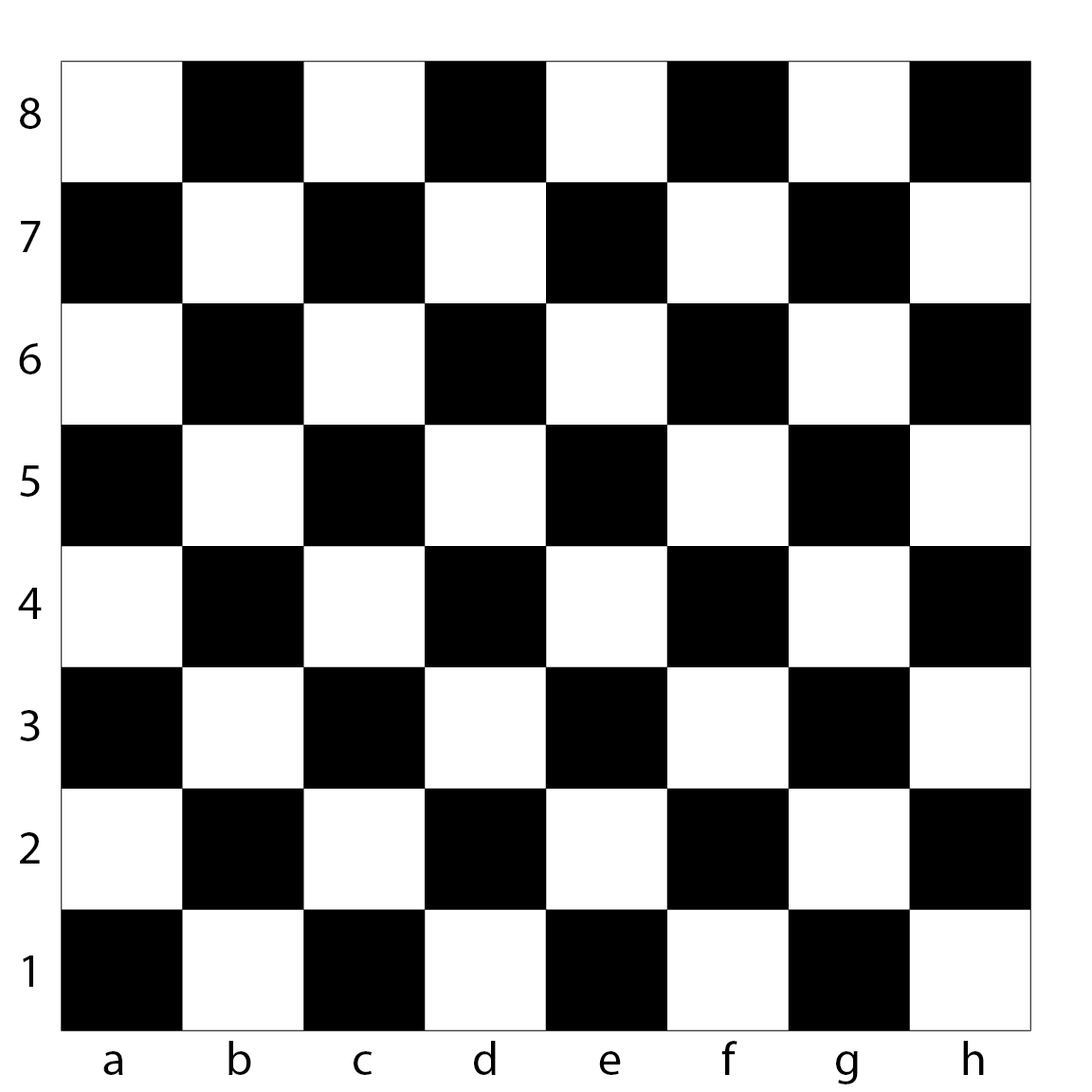
<style>
.page{position:relative;width:1092px;height:1092px;background:#ffffff}
.page>*{position:absolute;margin:0}
.t1{font:47.4px/122.4px "MyriadPro-Regular";color:#000000}
.t2{font:47.4px "MyriadPro-Regular";letter-spacing:2.1em;color:#000000}
</style>
<div class="page">
<p class="t1" style="left:18px;top:98px;width:24px;height:889px;text-align:center">8<br>7<br>6<br>5<br>4<br>3<br>2<br>1</p>
<p class="t2" style="left:103px;top:1041px;width:881px;height:43px">abcdefgh</p>
</div>
